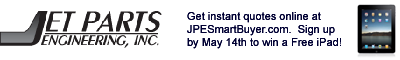
<style>
.page{position:relative;width:400px;height:60px;background:#ffffff}
.page>*{position:absolute;margin:0}
.t1{font:11px "ArialMT";color:#000033}
</style>
<div class="page">
<p class="t1" style="left:187px;top:12px;width:154px;height:37px">Get instant quotes online at<br>JPESmartBuyer.com.  Sign up<br>by May 14th to win a Free iPad!</p>
</div>
